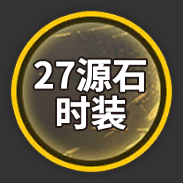
<style>
.page{position:relative;width:183px;height:183px;background:#333333}
.page>*{position:absolute;margin:0}
.t1{font:36.1px/37.9px "SourceHanSansCN-Bold";color:#ffffff}
</style>
<div class="page">
<p class="t1" style="left:34px;top:58px;width:112px;height:72px;text-align:center">27源石<br>时装</p>
</div>
